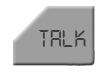
<style>
.page{position:relative;width:110px;height:72px;background:#ffffff}
.page>*{position:absolute;margin:0}
.t1{font:26px "DS-Digital";letter-spacing:-0.025em;color:#404040}
</style>
<div class="page">
<p class="t1" style="left:39px;top:29px;width:47px;height:19px">TALK</p>
</div>
